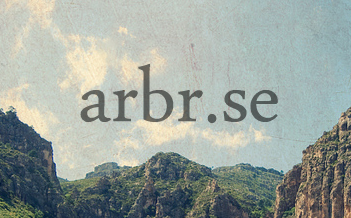
<style>
.page{position:relative;width:351px;height:218px}
.page>*{position:absolute;margin:0}
.t1{font:108px "ArabicTypesetting";color:#5c605c}
</style>
<div class="page">
<p class="t1" style="left:80px;top:64px;width:198px;height:59px">arbr.se</p>
</div>
